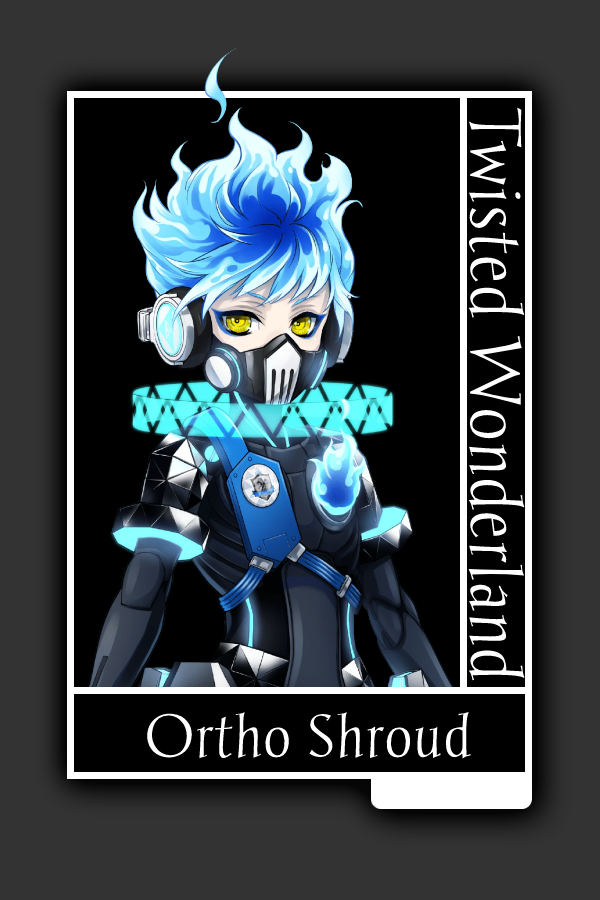
<style>
.page{position:relative;width:600px;height:900px;background:#000000}
.page>*{position:absolute;margin:0}
.t1{font:60px "Chantelli-Antiqua";color:#ffffff}
.t2{font:50px "Chantelli-Antiqua";color:#ffffff}
</style>
<div class="page">
<p class="t1" style="left:468px;top:107px;width:57px;height:574px;rotate:90deg">Twisted Wonderland</p>
<p class="t2" style="left:145px;top:712px;width:326px;height:47px">Ortho Shroud</p>
</div>
